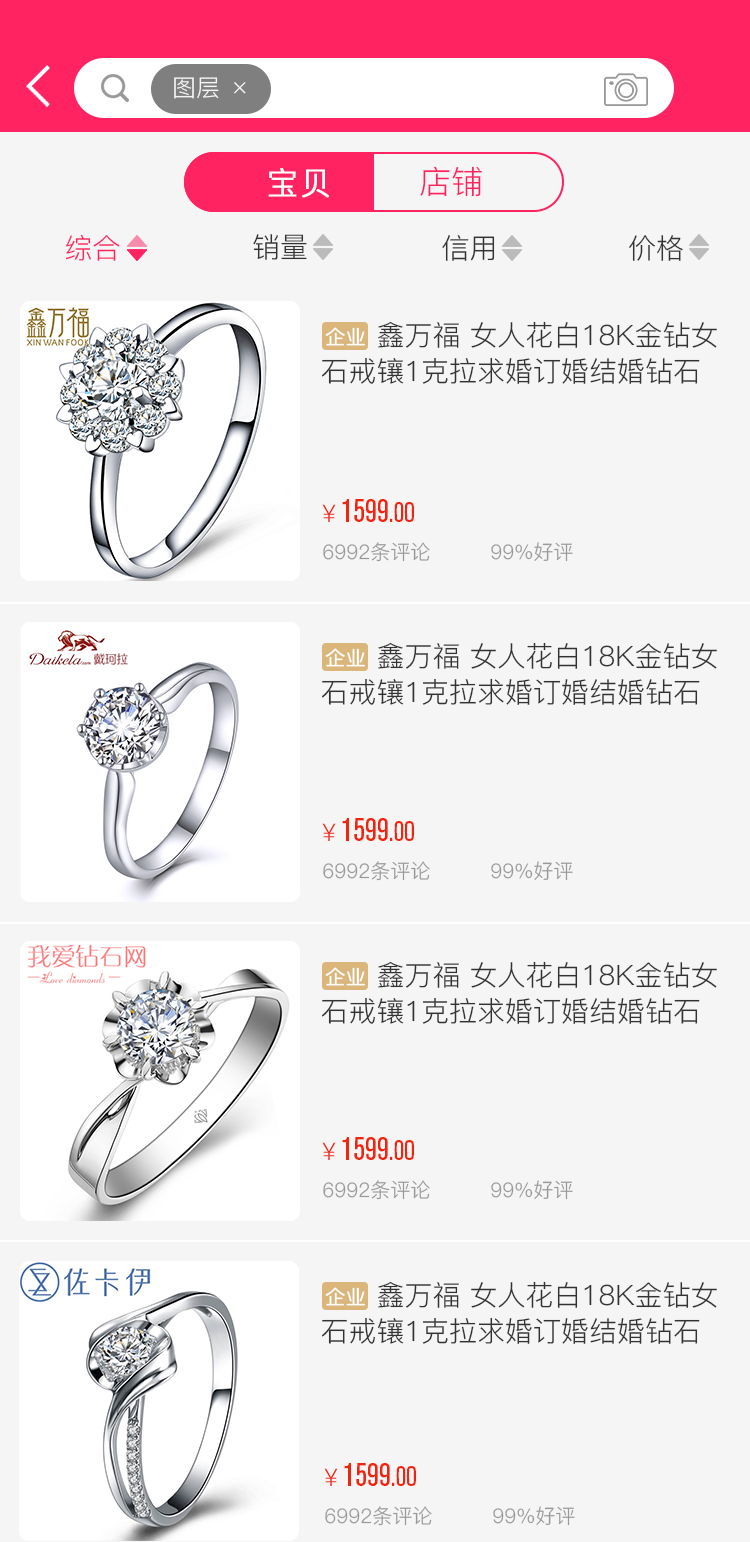
<style>
.page{position:relative;width:750px;height:1542px;background:#f5f5f5}
.page>*{position:absolute;margin:0}
.t1{font:24px "PingFang-SC-Regular";color:#f5f5f5}
.t2{font:32px "PingFang-SC-Regular";color:#ffffff;font-weight:bold}
.t3{font:32px "PingFang-SC-Regular";color:#ff2362}
.t4{font:28px "PingFang-SC-Regular";color:#ff2362}
.t5{font:28px "PingFang-SC-Regular";color:#333333}
.t6{font:28px/36px "PingFang-SC-Regular";color:#333333}
.t7{font:24px/36px "PingFang-SC-Regular";color:#333333}
.t8{font:32px "AkzidenzGroteskBQ-Cnd";color:#f0250f}
.t9{font:24px "PingFang-SC-Regular";color:#f0250f}
.t10{font:28px "AkzidenzGroteskBQ-Cnd";color:#f0250f}
.t11{font:20px "PingFang-SC-Regular";color:#999999}
</style>
<div class="page">
<p class="t1" style="left:174px;top:77px;width:45px;height:22px">图层</p>
<p class="t1" style="left:234px;top:82px;width:12px;height:12px">×</p>
<p class="t2" style="left:268px;top:168px;width:61px;height:30px">宝贝</p>
<p class="t3" style="left:420px;top:166px;width:62px;height:31px">店铺</p>
<p class="t4" style="left:65px;top:234px;width:55px;height:27px">综合</p>
<p class="t5" style="left:253px;top:234px;width:54px;height:26px">销量</p>
<p class="t5" style="left:442px;top:235px;width:53px;height:26px">信用</p>
<p class="t5" style="left:629px;top:235px;width:54px;height:26px">价格</p>
<p class="t6" style="left:322px;top:321px;width:395px;height:63px"><span class="t7">       </span>鑫万福 女人花白18K金钻女<br>石戒镶1克拉求婚订婚结婚钻石</p>
<p class="t8" style="left:322px;top:499px;width:92px;height:23px"><span class="t9">￥</span>1599<span class="t10">.00</span></p>
<p class="t11" style="left:323px;top:542px;width:250px;height:20px">6992条评论         99%好评</p>
<p class="t6" style="left:322px;top:642px;width:395px;height:63px"><span class="t7">       </span>鑫万福 女人花白18K金钻女<br>石戒镶1克拉求婚订婚结婚钻石</p>
<p class="t8" style="left:322px;top:818px;width:92px;height:23px"><span class="t9">￥</span>1599<span class="t10">.00</span></p>
<p class="t11" style="left:323px;top:861px;width:250px;height:20px">6992条评论         99%好评</p>
<p class="t6" style="left:322px;top:961px;width:395px;height:63px"><span class="t7">       </span>鑫万福 女人花白18K金钻女<br>石戒镶1克拉求婚订婚结婚钻石</p>
<p class="t8" style="left:322px;top:1137px;width:92px;height:23px"><span class="t9">￥</span>1599<span class="t10">.00</span></p>
<p class="t11" style="left:323px;top:1180px;width:250px;height:20px">6992条评论         99%好评</p>
<p class="t6" style="left:322px;top:1281px;width:395px;height:63px"><span class="t7">       </span>鑫万福 女人花白18K金钻女<br>石戒镶1克拉求婚订婚结婚钻石</p>
<p class="t8" style="left:324px;top:1463px;width:92px;height:23px"><span class="t9">￥</span>1599<span class="t10">.00</span></p>
<p class="t11" style="left:325px;top:1506px;width:250px;height:20px">6992条评论         99%好评</p>
</div>
